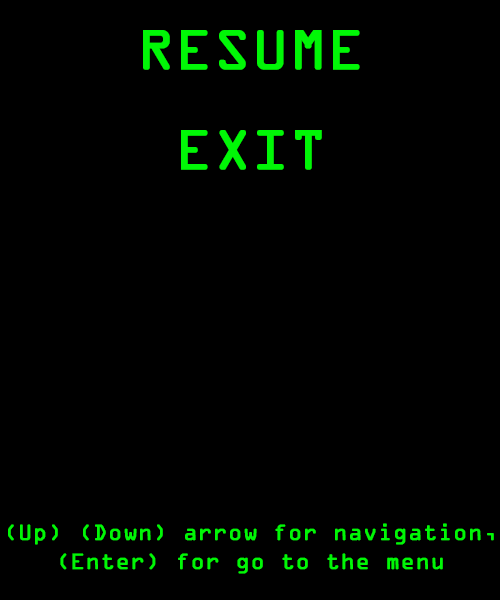
<style>
.page{position:relative;width:500px;height:600px;background:#000000}
.page>*{position:absolute;margin:0}
.t1{font:60px "OCRAExtended";color:#00f706;text-transform:uppercase;font-weight:bold}
.t2{font:24px "OCRAExtended";color:#00f706;font-weight:bold}
</style>
<div class="page">
<p class="t1" style="left:143px;top:30px;width:217px;height:40px">Resume</p>
<p class="t1" style="left:181px;top:130px;width:141px;height:40px">Exit</p>
<p class="t1" style="left:181px;top:130px;width:141px;height:40px">Exit</p>
<p class="t2" style="left:8px;top:523px;width:486px;height:51px;text-align:center">(Up) (Down) arrow for navigation,<br>(Enter) for go to the menu</p>
</div>
